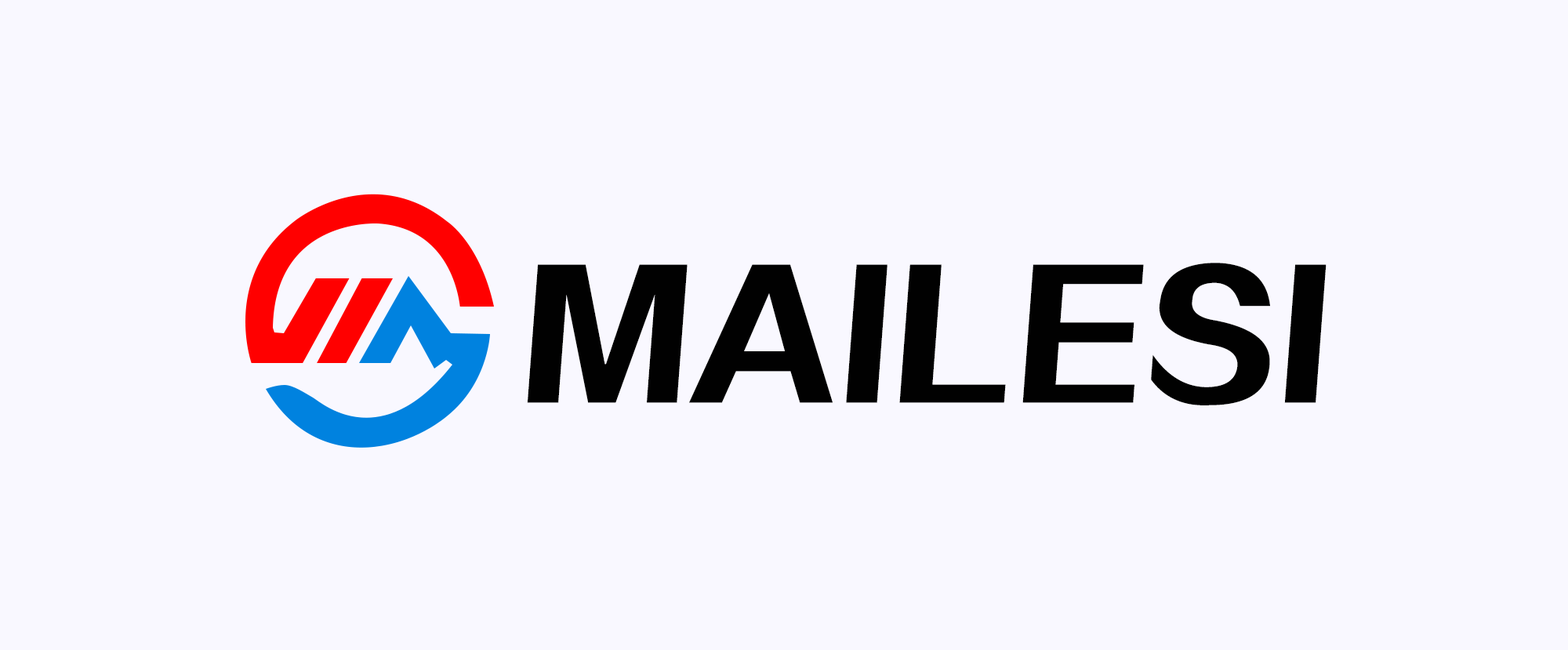
<style>
.page{position:relative;width:1568px;height:650px;background:#f9f8ff}
.page>*{position:absolute;margin:0}
.t1{font:164.4px "FZZDHJW--GB1-0";color:#010101}
</style>
<div class="page">
<p class="t1" style="left:527px;top:263px;width:800px;height:142px">MAILESI</p>
</div>
